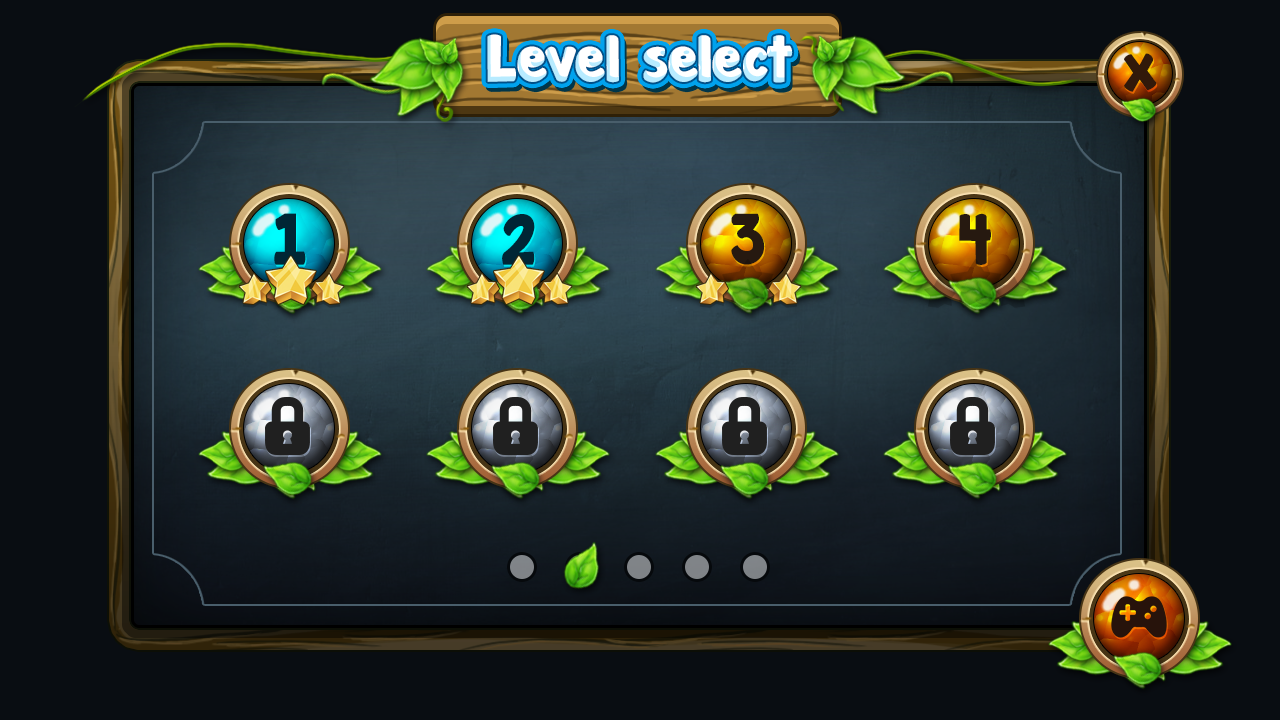
<style>
.page{position:relative;width:1280px;height:720px;background:#090d12}
.page>*{position:absolute;margin:0}
.t1{font:58.7px "JandaManateeSolid";color:#ffffff}
.t2{font:46.1px "JandaManateeSolid";color:#31190a}
.t3{font:63.9px "JandaManateeSolid";color:#002635}
.t4{font:63.9px "JandaManateeSolid";color:#261910}
</style>
<div class="page">
<p class="t1" style="left:487px;top:34px;width:306px;height:49px">Level select</p>
<p class="t2" style="left:1124px;top:53px;width:33px;height:39px">X</p>
<p class="t3" style="left:274px;top:213px;width:32px;height:52px">1</p>
<p class="t3" style="left:502px;top:214px;width:33px;height:51px">2</p>
<p class="t4" style="left:731px;top:213px;width:34px;height:52px">3</p>
<p class="t4" style="left:959px;top:213px;width:32px;height:52px">4</p>
</div>
